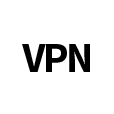
<style>
.page{position:relative;width:114px;height:114px;background:#ffffff}
.page>*{position:absolute;margin:0}
.t1{font:41.5px "SourceSansPro-Bold";letter-spacing:-0.04em;color:#000000}
</style>
<div class="page">
<p class="t1" style="left:22px;top:44px;width:68px;height:28px">VPN</p>
</div>
